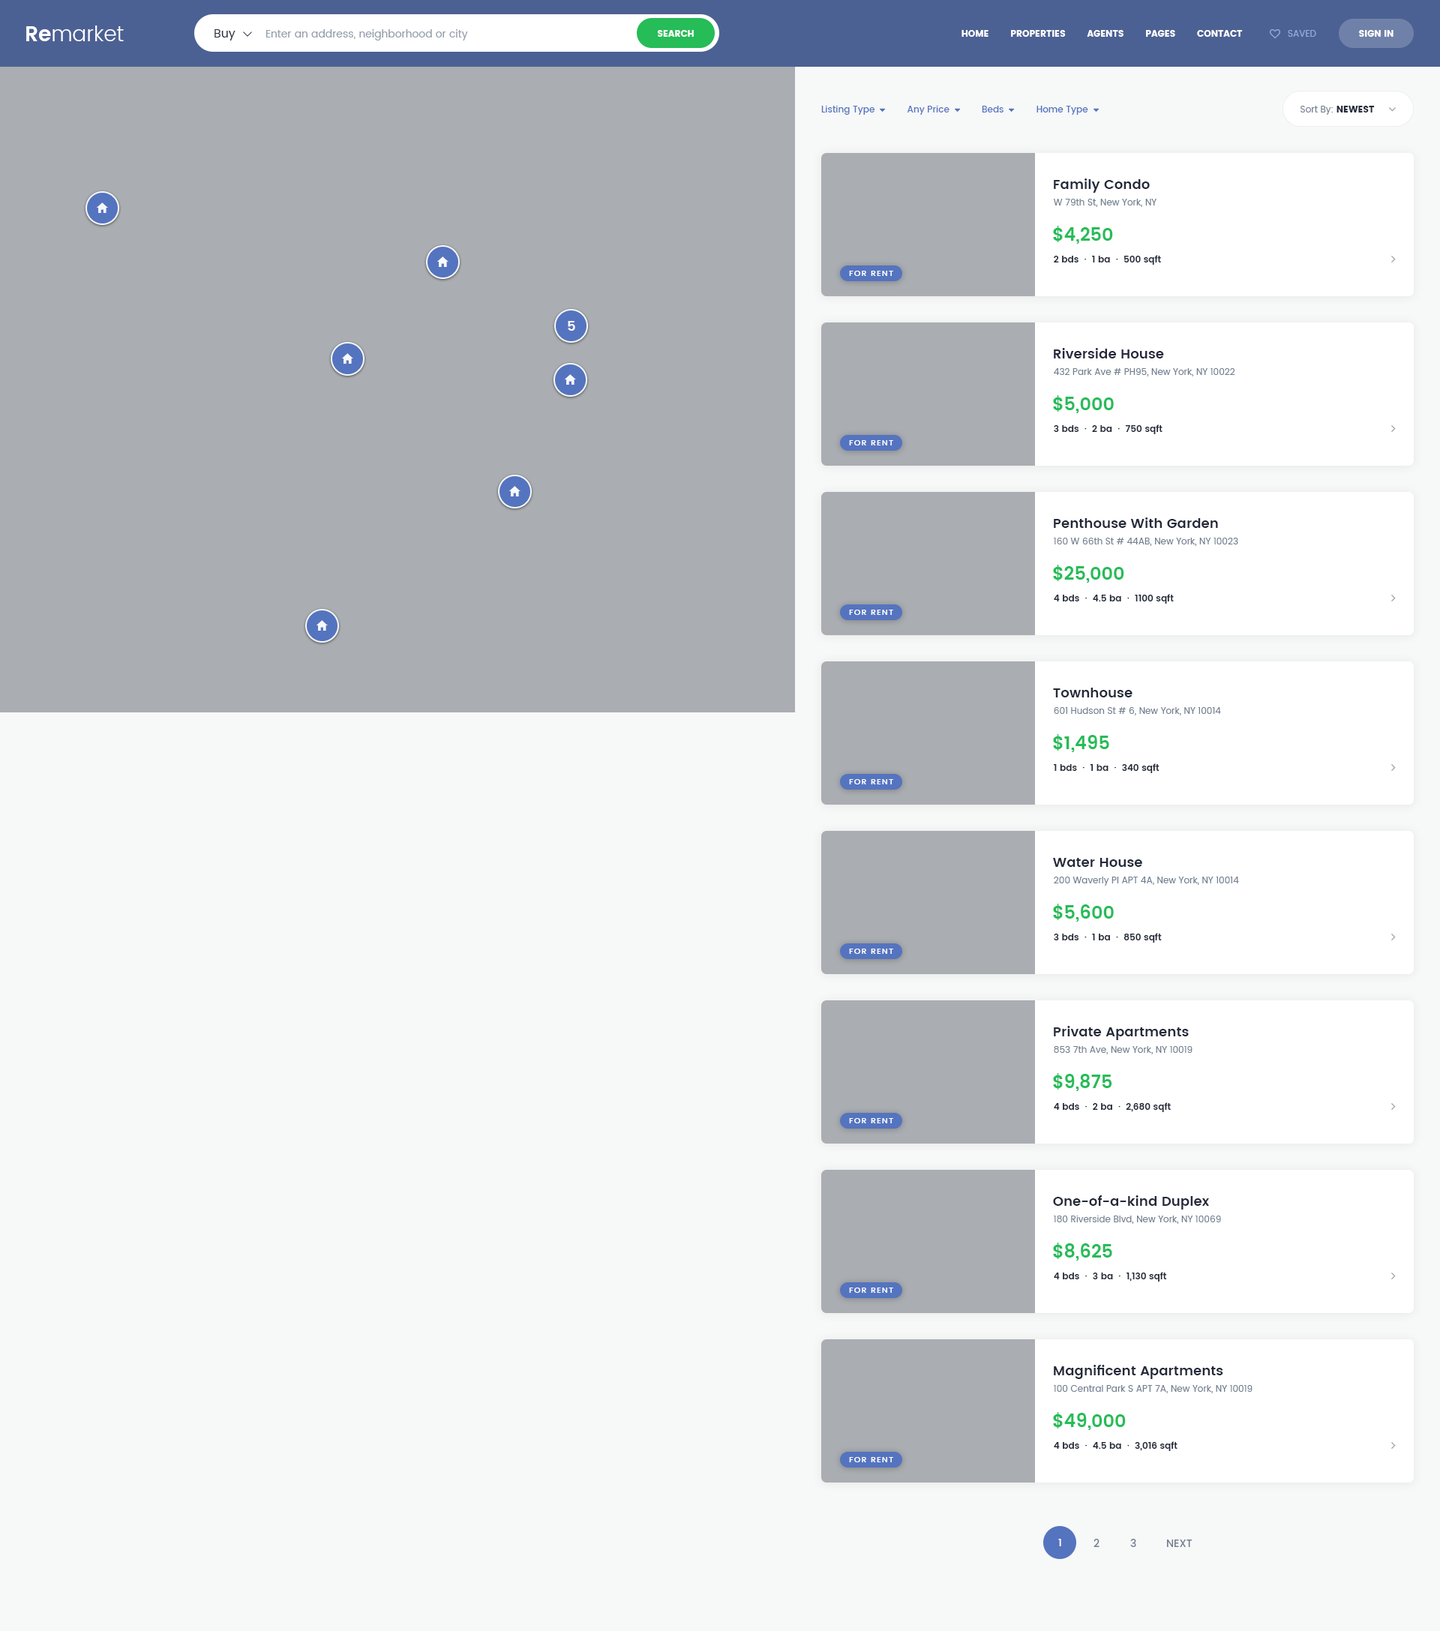
<style>
.page{position:relative;width:1440px;height:1631px;background:#f7f8f8}
.page>*{position:absolute;margin:0}
.t1{font:21px "Poppins-Light";color:#ffffff}
.t2{font:21px "Poppins-SemiBold";color:#ffffff}
.t3{font:12px "Poppins-Regular";color:#242a3a}
.t4{font:10.5px "Poppins-Regular";color:#95a0ad}
.t5{font:9px "Poppins";color:#ffffff;text-transform:uppercase}
.t6{font:9px "Poppins-Regular";color:#93ace2;text-transform:uppercase}
.t7{font:9px "Poppins-Medium";color:#5574bf}
.t8{font:9px "Poppins-Regular";color:#727f90}
.t9{font:9px "Poppins";color:#242a3a;text-transform:uppercase}
.t10{font:13.5px "Poppins-SemiBold";color:#242a3a}
.t11{font:18px "Poppins-SemiBold";color:#26bc58}
.t12{font:9px "Poppins-SemiBold";color:#242a3a}
.t13{font:8.2px "Poppins-Medium";letter-spacing:0.1em;color:#ffffff;text-transform:uppercase}
.t14{font:13.5px "Poppins-SemiBold";color:#f7f8f8}
.t15{font:10.5px "Poppins-Medium";color:#ffffff}
.t16{font:10.5px "Poppins-Medium";color:#727f90}
.t17{font:10.5px "Poppins-Medium";color:#727f90;text-transform:uppercase}
</style>
<div class="page">
<p class="t1" style="left:26px;top:26px;width:98px;height:15px"><span class="t2">Re</span>market</p>
<p class="t3" style="left:214px;top:29px;width:22px;height:11px">Buy</p>
<p class="t4" style="left:266px;top:29px;width:202px;height:11px">Enter an address, neighborhood or city</p>
<p class="t5" style="left:657px;top:30px;width:37px;height:7px">Search</p>
<p class="t5" style="left:962px;top:30px;width:281px;height:7px">Home        Properties        Agents        Pages        Contact</p>
<p class="t6" style="left:1288px;top:30px;width:28px;height:7px">Saved</p>
<p class="t5" style="left:1359px;top:30px;width:35px;height:7px">Sign In</p>
<p class="t7" style="left:821px;top:106px;width:267px;height:9px">Listing Type            Any Price            Beds            Home Type</p>
<p class="t8" style="left:1300px;top:106px;width:75px;height:9px">Sort By:<span class="t9"> Newest</span></p>
<p class="t10" style="left:1054px;top:178px;width:96px;height:15px">Family Condo</p>
<p class="t8" style="left:1053px;top:199px;width:104px;height:8px">W 79th St, New York, NY</p>
<p class="t11" style="left:1053px;top:226px;width:60px;height:18px">$4,250</p>
<p class="t12" style="left:1054px;top:255px;width:107px;height:10px">2 bds  ∙  1 ba  ∙  500 sqft</p>
<p class="t13" style="left:849px;top:271px;width:44px;height:5px">For rent</p>
<p class="t14" style="left:568px;top:321px;width:7px;height:10px">5</p>
<p class="t10" style="left:1054px;top:348px;width:110px;height:10px">Riverside House</p>
<p class="t8" style="left:1054px;top:368px;width:181px;height:8px">432 Park Ave # PH95, New York, NY 10022</p>
<p class="t11" style="left:1053px;top:395px;width:61px;height:18px">$5,000</p>
<p class="t12" style="left:1054px;top:424px;width:108px;height:10px">3 bds  ∙  2 ba  ∙  750 sqft</p>
<p class="t13" style="left:849px;top:440px;width:44px;height:6px">For rent</p>
<p class="t10" style="left:1054px;top:518px;width:164px;height:10px">Penthouse With Garden</p>
<p class="t8" style="left:1054px;top:538px;width:184px;height:8px">160 W 66th St # 44AB, New York, NY 10023</p>
<p class="t11" style="left:1053px;top:565px;width:71px;height:18px">$25,000</p>
<p class="t12" style="left:1054px;top:594px;width:120px;height:10px">4 bds  ∙  4.5 ba  ∙  1100 sqft</p>
<p class="t13" style="left:849px;top:610px;width:44px;height:5px">For rent</p>
<p class="t10" style="left:1053px;top:688px;width:79px;height:10px">Townhouse</p>
<p class="t8" style="left:1054px;top:707px;width:167px;height:9px">601 Hudson St # 6, New York, NY 10014</p>
<p class="t11" style="left:1053px;top:734px;width:56px;height:18px">$1,495</p>
<p class="t12" style="left:1054px;top:764px;width:106px;height:9px">1 bds  ∙  1 ba  ∙  340 sqft</p>
<p class="t13" style="left:849px;top:779px;width:44px;height:5px">For rent</p>
<p class="t10" style="left:1053px;top:858px;width:89px;height:9px">Water House</p>
<p class="t8" style="left:1054px;top:877px;width:185px;height:9px">200 Waverly Pl APT 4A, New York, NY 10014</p>
<p class="t11" style="left:1053px;top:904px;width:61px;height:18px">$5,600</p>
<p class="t12" style="left:1054px;top:933px;width:108px;height:10px">3 bds  ∙  1 ba  ∙  850 sqft</p>
<p class="t13" style="left:849px;top:949px;width:44px;height:5px">For rent</p>
<p class="t10" style="left:1054px;top:1026px;width:135px;height:14px">Private Apartments</p>
<p class="t8" style="left:1054px;top:1046px;width:138px;height:8px">853 7th Ave, New York, NY 10019</p>
<p class="t11" style="left:1053px;top:1073px;width:59px;height:18px">$9,875</p>
<p class="t12" style="left:1054px;top:1102px;width:117px;height:10px">4 bds  ∙  2 ba  ∙  2,680 sqft</p>
<p class="t13" style="left:849px;top:1118px;width:44px;height:6px">For rent</p>
<p class="t10" style="left:1053px;top:1196px;width:156px;height:14px">One-of-a-kind Duplex</p>
<p class="t8" style="left:1054px;top:1216px;width:167px;height:8px">180 Riverside Blvd, New York, NY 10069</p>
<p class="t11" style="left:1053px;top:1243px;width:59px;height:18px">$8,625</p>
<p class="t12" style="left:1054px;top:1272px;width:113px;height:10px">4 bds  ∙  3 ba  ∙  1,130 sqft</p>
<p class="t13" style="left:849px;top:1288px;width:44px;height:5px">For rent</p>
<p class="t10" style="left:1054px;top:1365px;width:169px;height:14px">Magnificent Apartments</p>
<p class="t8" style="left:1054px;top:1385px;width:198px;height:9px">100 Central Park S APT 7A, New York, NY 10019</p>
<p class="t11" style="left:1053px;top:1412px;width:73px;height:18px">$49,000</p>
<p class="t12" style="left:1054px;top:1442px;width:124px;height:9px">4 bds  ∙  4.5 ba  ∙  3,016 sqft</p>
<p class="t13" style="left:849px;top:1457px;width:44px;height:5px">For rent</p>
<p class="t15" style="left:1058px;top:1539px;width:3px;height:7px">1</p>
<p class="t16" style="left:1094px;top:1539px;width:6px;height:8px">2</p>
<p class="t16" style="left:1130px;top:1539px;width:6px;height:8px">3</p>
<p class="t17" style="left:1166px;top:1540px;width:26px;height:7px">Next</p>
</div>
